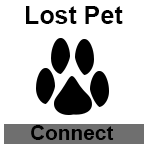
<style>
.page{position:relative;width:150px;height:150px;background:#ffffff}
.page>*{position:absolute;margin:0}
.t1{font:25px "Arial-BoldMT";color:#000000}
.t2{font:20.8px "Arial-BoldMT";color:#000000}
</style>
<div class="page">
<p class="t1" style="left:26px;top:6px;width:97px;height:18px">Lost Pet</p>
<p class="t2" style="left:31px;top:125px;width:83px;height:15px">Connect</p>
</div>
